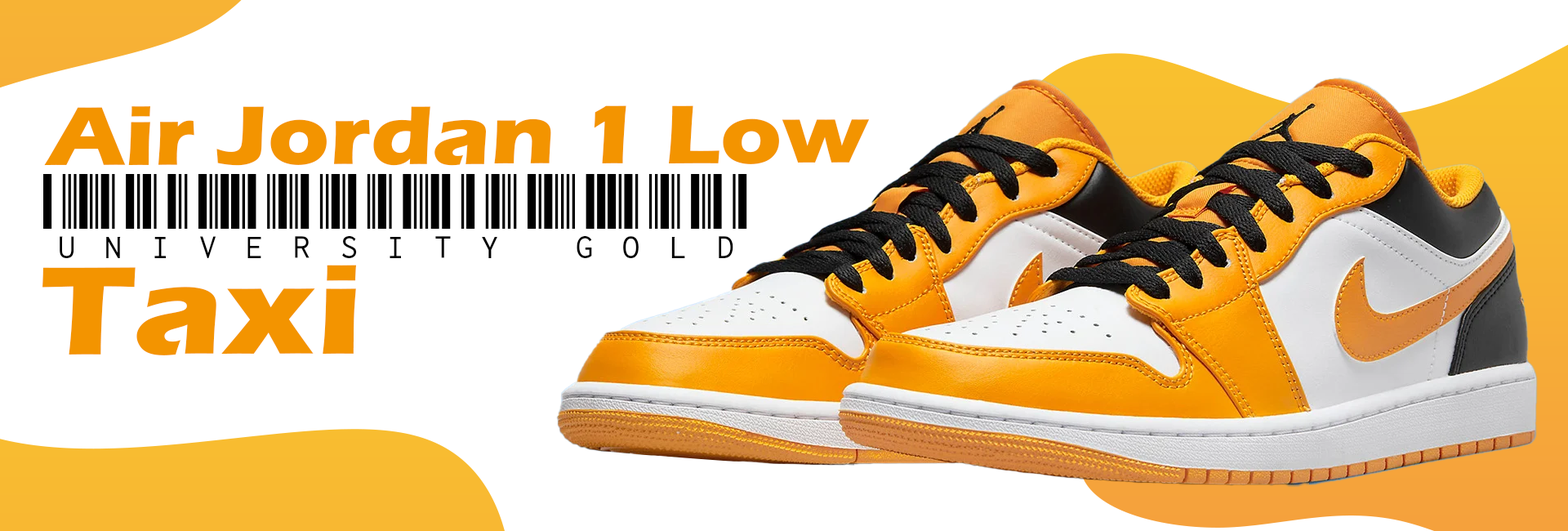
<style>
.page{position:relative;width:1568px;height:531px;background:#ffffff}
.page>*{position:absolute;margin:0}
.t1{font:86.1px "ErasITC-Bold";color:#f39400;scale:1.1 1}
.t2{font:92.3px "LibreBarcode39Text-Regular";color:#000000}
.t3{font:130px "ErasITC-Bold";color:#f39400;scale:1.13 1}
</style>
<div class="page">
<p class="t1" style="left:44px;top:105px;width:826px;height:61px">Air Jordan 1 Low</p>
<p class="t2" style="left:43px;top:174px;width:704px;height:84px">University Gold</p>
<p class="t3" style="left:42px;top:265px;width:314px;height:90px">Taxi</p>
</div>
